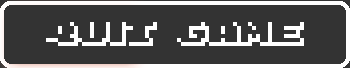
<style>
.page{position:relative;width:350px;height:68px;background:#333333}
.page>*{position:absolute;margin:0}
.t1{font:63.5px "8-bit-Arcade-Out";color:#ffffff}
</style>
<div class="page">
<p class="t1" style="left:46px;top:22px;width:258px;height:24px">quit game</p>
</div>
